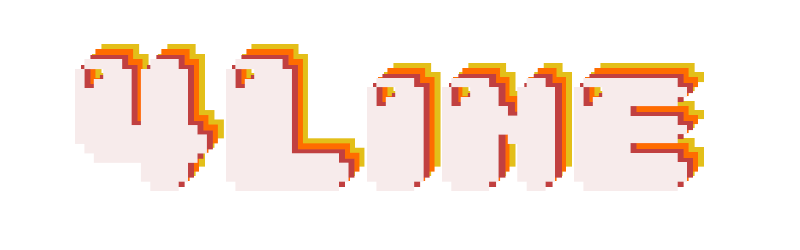
<style>
.page{position:relative;width:800px;height:250px;background:#ffffff}
.page>*{position:absolute;margin:0}
.t1{font:160px "04b30";color:#ff6c00}
.t2{font:160px "04b30";color:#e4c019}
.t3{font:160px "04b30";color:#f8ebeb}
.t4{font:160px "04b30";color:#c14040}
</style>
<div class="page">
<p class="t1" style="left:86px;top:49px;width:612px;height:132px">4Line</p>
<p class="t2" style="left:92px;top:44px;width:612px;height:132px">4Line</p>
<p class="t3" style="left:75px;top:59px;width:612px;height:132px">4Line</p>
<p class="t4" style="left:81px;top:55px;width:612px;height:132px">4Line</p>
</div>
